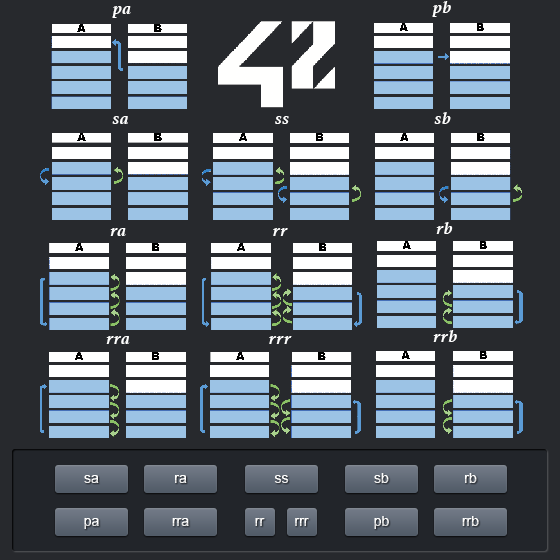
<style>
.page{position:relative;width:560px;height:560px;background:#27292d}
.page>*{position:absolute;margin:0}
.t1{font:18px "Athelas-BoldItalic";letter-spacing:0.045em;color:#ffffff}
.t2{font:14px "ArialMT";color:#ffffff}
.t3{font:14px "ArialMT";color:#efefef}
</style>
<div class="page">
<p class="t1" style="left:112px;top:6px;width:19px;height:12px">pa</p>
<p class="t1" style="left:432px;top:1px;width:19px;height:16px">pb</p>
<p class="t1" style="left:434px;top:112px;width:17px;height:12px">sb</p>
<p class="t1" style="left:112px;top:116px;width:16px;height:8px">sa</p>
<p class="t1" style="left:275px;top:116px;width:14px;height:8px">ss</p>
<p class="t1" style="left:436px;top:222px;width:17px;height:12px">rb</p>
<p class="t1" style="left:110px;top:228px;width:16px;height:8px">ra</p>
<p class="t1" style="left:273px;top:228px;width:15px;height:8px">rr</p>
<p class="t1" style="left:106px;top:336px;width:24px;height:8px">rra</p>
<p class="t1" style="left:269px;top:336px;width:23px;height:8px">rrr</p>
<p class="t1" style="left:433px;top:330px;width:24px;height:12px">rrb</p>
<p class="t2" style="left:374px;top:473px;width:15px;height:10px">sb</p>
<p class="t2" style="left:465px;top:473px;width:12px;height:10px">rb</p>
<p class="t2" style="left:84px;top:475px;width:15px;height:8px">sa</p>
<p class="t2" style="left:175px;top:475px;width:12px;height:8px">ra</p>
<p class="t2" style="left:274px;top:475px;width:15px;height:8px">ss</p>
<p class="t2" style="left:84px;top:518px;width:15px;height:11px">pa</p>
<p class="t2" style="left:172px;top:518px;width:17px;height:8px">rra</p>
<p class="t2" style="left:255px;top:518px;width:10px;height:8px">rr</p>
<p class="t2" style="left:295px;top:518px;width:14px;height:8px">rrr</p>
<p class="t3" style="left:374px;top:516px;width:15px;height:13px">pb</p>
<p class="t2" style="left:462px;top:516px;width:17px;height:10px">rrb</p>
</div>
